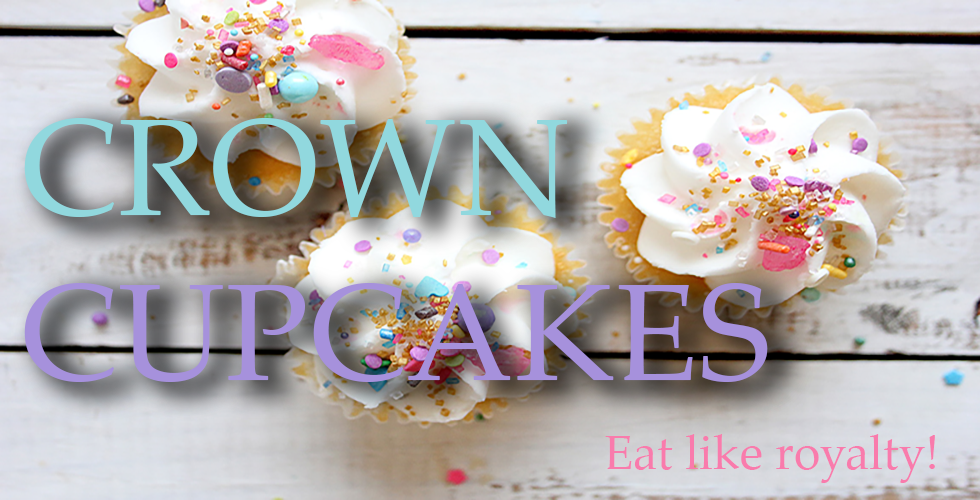
<style>
.page{position:relative;width:980px;height:500px}
.page>*{position:absolute;margin:0}
.t1{font:138px "PalatinoLinotype-Roman";color:#a691dc}
.t2{font:138px "PalatinoLinotype-Roman";color:#91d8de}
.t3{font:48px "PalatinoLinotype-Roman";color:#f97bac}
</style>
<div class="page">
<p class="t1" style="left:24px;top:118px;width:744px;height:264px"><span class="t2">CROWN<br></span>CUPCAKES</p>
<p class="t3" style="left:605px;top:434px;width:330px;height:49px">Eat like royalty!</p>
</div>
